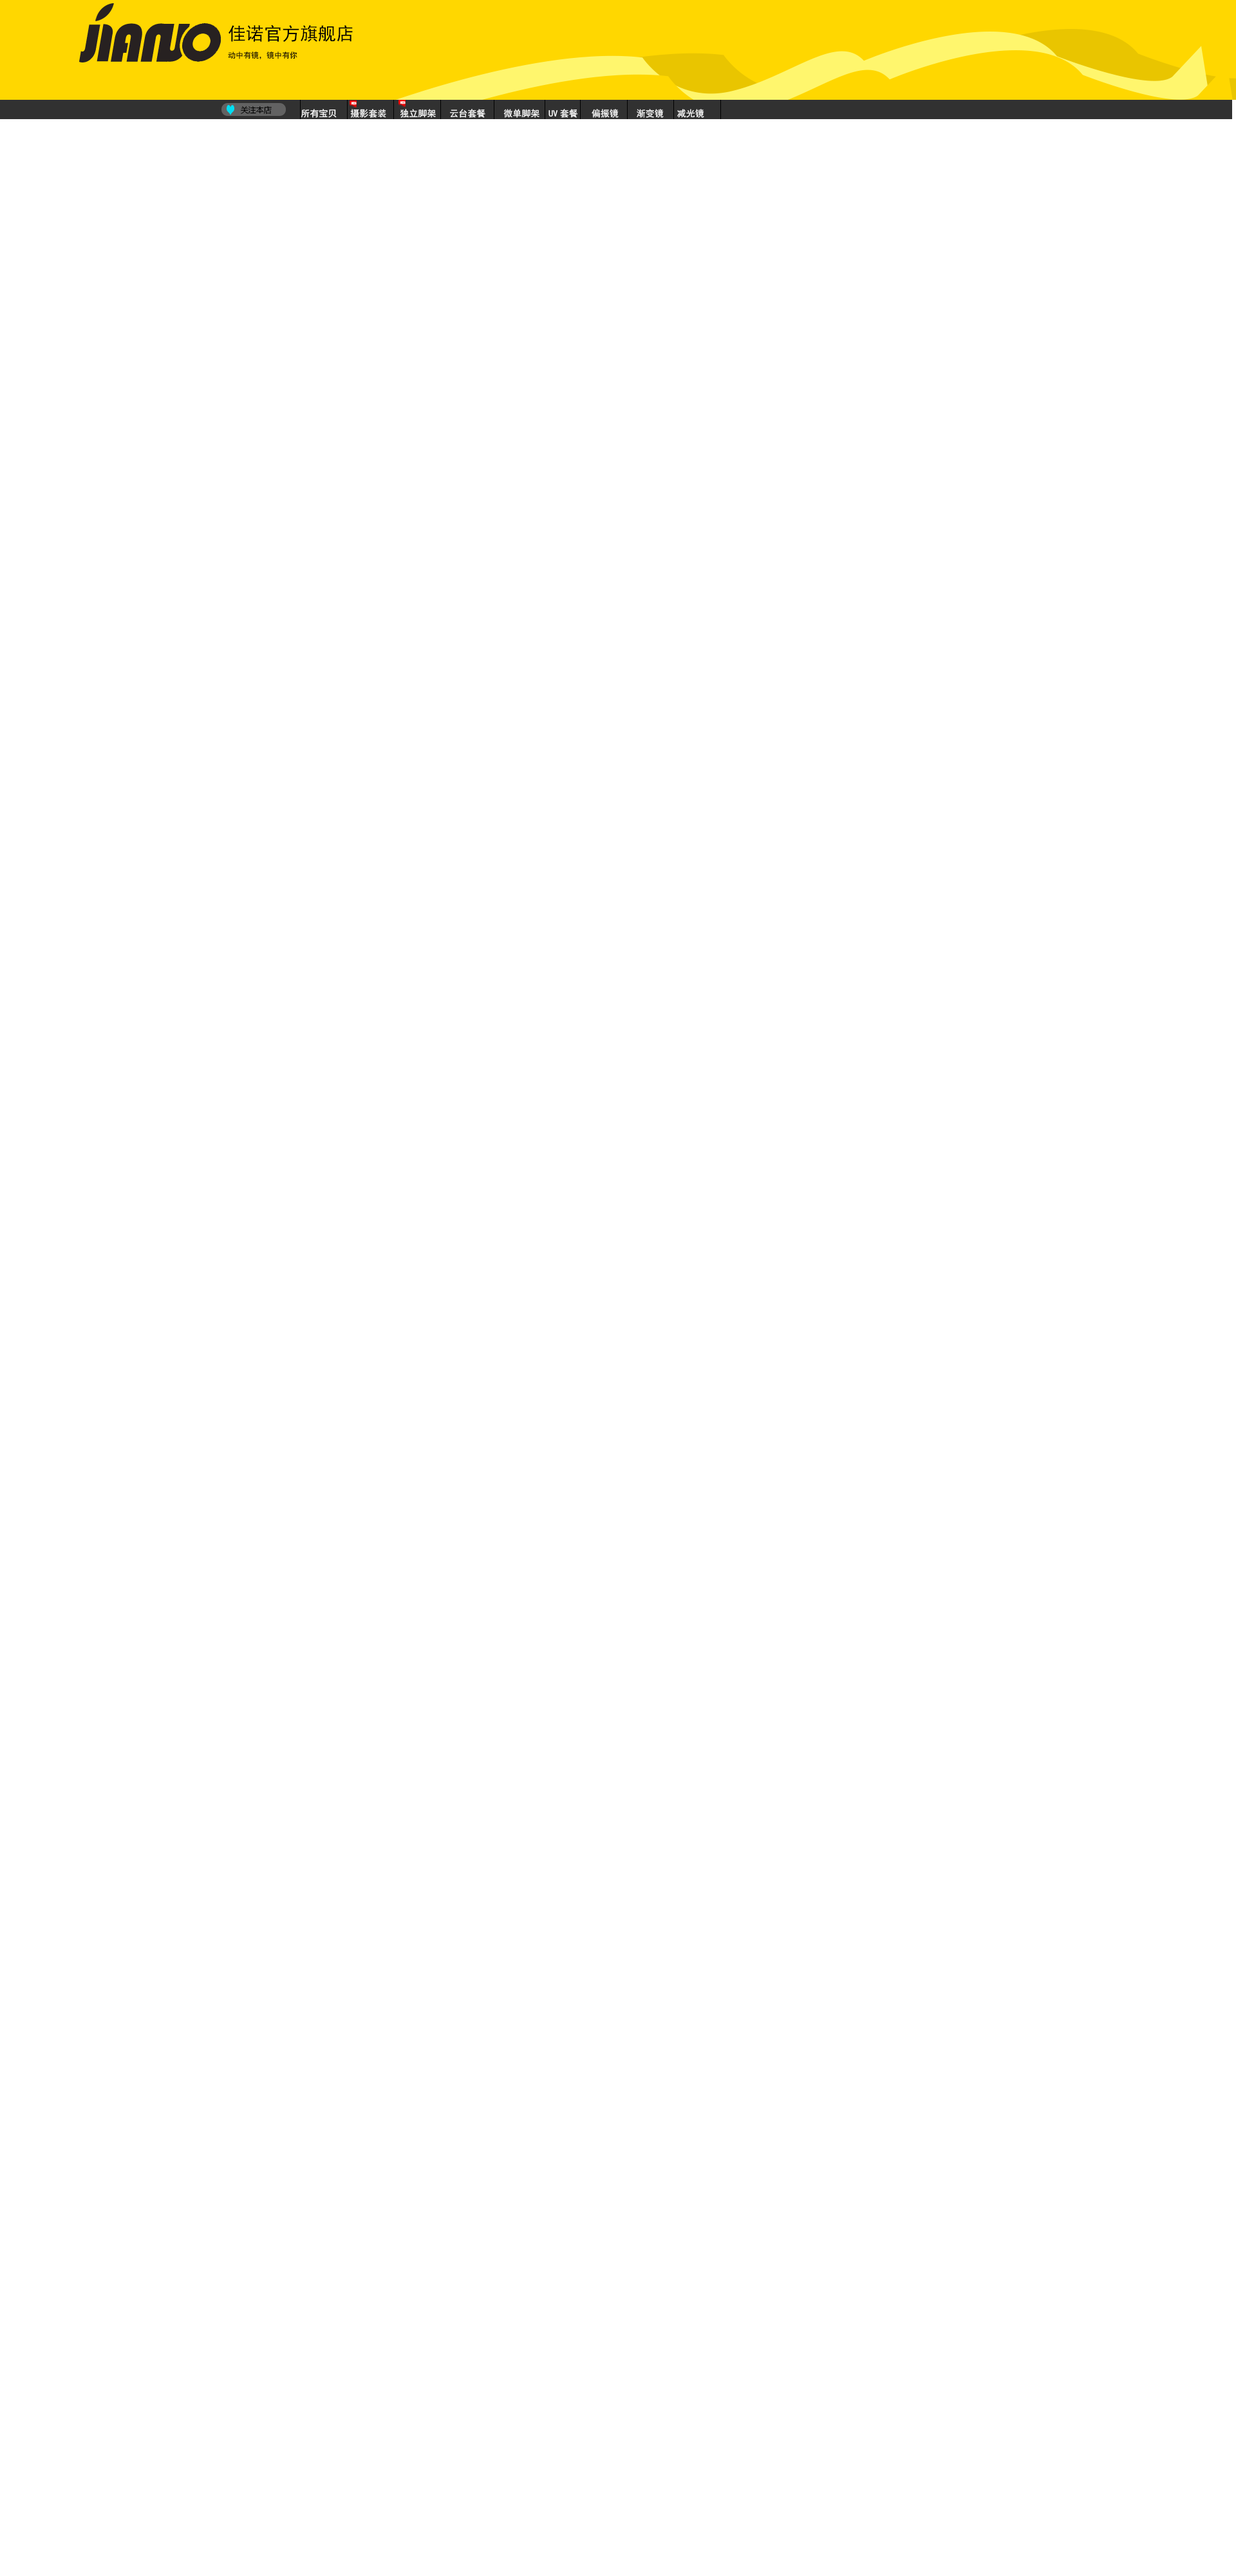
<style>
.page{position:relative;width:1236px;height:2576px;background:#ffffff}
.page>*{position:absolute;margin:0}
.t1{font:18px "SimHei";color:#000000}
.t2{font:7.7px "SimHei";color:#000000}
.t3{font:3.2px "SimHei";color:#ffffff}
.t4{font:7.7px "MicrosoftYaHei";color:#000000}
.t5{font:9px "SimHei";color:#ffffff}
</style>
<div class="page">
<p class="t1" style="left:229px;top:24px;width:124px;height:18px">佳诺官方旗舰店</p>
<p class="t2" style="left:228px;top:52px;width:70px;height:7px">动中有镜，镜中有你</p>
<p class="t3" style="left:352px;top:102px;width:5px;height:3px">NES</p>
<p class="t3" style="left:401px;top:101px;width:5px;height:3px">NES</p>
<p class="t4" style="left:241px;top:106px;width:31px;height:8px">关注本店</p>
<p class="t5" style="left:301px;top:109px;width:404px;height:9px">所有宝贝   摄影套装   独立脚架   云台套餐    微单脚架  UV套餐   偏振镜    渐变镜   减光镜</p>
</div>
